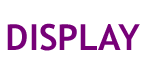
<style>
.page{position:relative;width:146px;height:68px;background:#ffffff}
.page>*{position:absolute;margin:0}
.t1{font:36px "TrebuchetMS-Bold";color:#770078}
</style>
<div class="page">
<p class="t1" style="left:7px;top:23px;width:133px;height:28px">DISPLAY</p>
</div>
